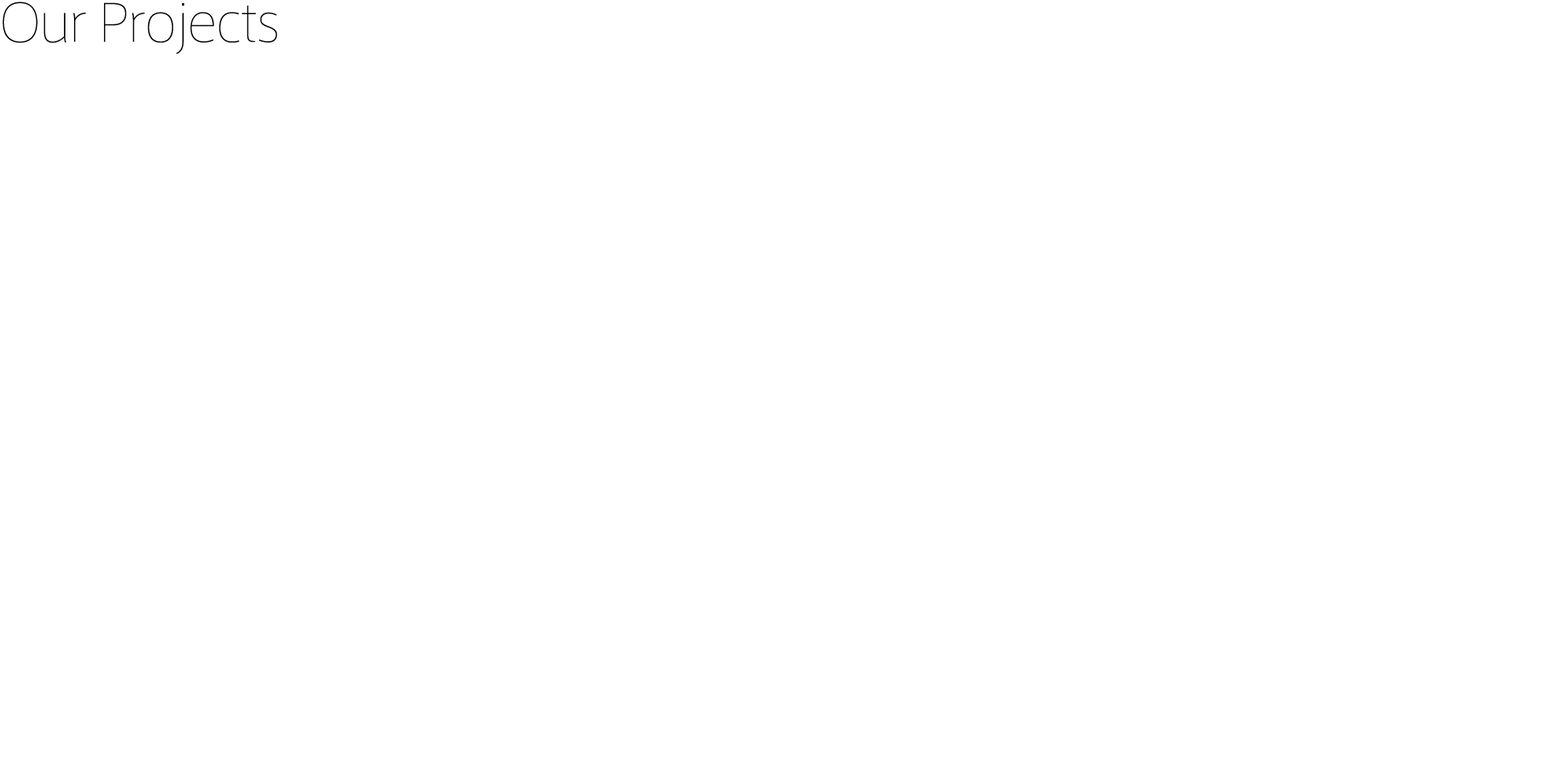
<style>
.page{position:relative;width:1544px;height:772px;background:#ffffff}
.page>*{position:absolute;margin:0}
.t1{font:50.4px "AxisStd-UltraLight";color:#000000}
</style>
<div class="page">
<p class="t1" style="left:2px;top:2px;width:275px;height:52px">Our Projects</p>
</div>
